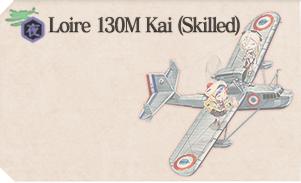
<style>
.page{position:relative;width:301px;height:183px}
.page>*{position:absolute;margin:0}
.t1{font:20px "MatissePro-B";letter-spacing:-0.08em;color:#4e4945;scale:0.9 1}
</style>
<div class="page">
<p class="t1" style="left:48px;top:15px;width:192px;height:21px">Loire 130M Kai (Skilled)</p>
</div>
